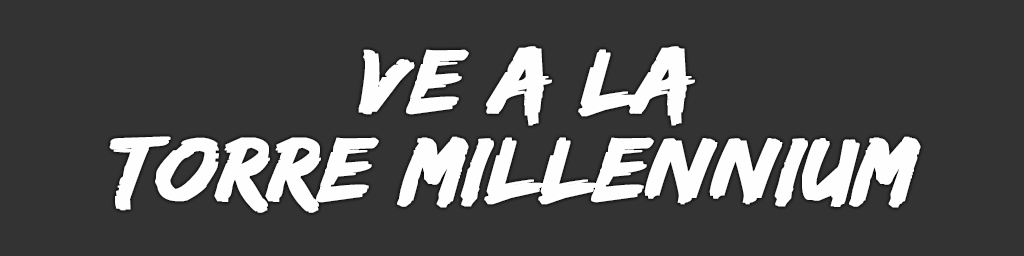
<style>
.page{position:relative;width:1024px;height:256px;background:#333333}
.page>*{position:absolute;margin:0}
.t1{font:94px/88px "EdoSZ";color:#fefefe;font-weight:bold;font-style:italic;scale:1.04 1}
</style>
<div class="page">
<p class="t1" style="left:109px;top:46px;width:812px;height:167px;text-align:center">ve a la<br>torre Millennium</p>
</div>
